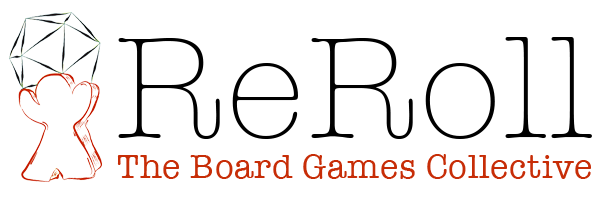
<style>
.page{position:relative;width:600px;height:200px;background:#ffffff}
.page>*{position:absolute;margin:0}
.t1{font:147.2px "AmericanTypewriter-Light";letter-spacing:0.02em;color:#000000}
.t2{font:34.3px "AmericanTypewriter";letter-spacing:0.02em;color:#c72d07}
</style>
<div class="page">
<p class="t1" style="left:118px;top:37px;width:474px;height:102px">ReRoll</p>
<p class="t2" style="left:117px;top:154px;width:474px;height:25px">The Board Games Collective</p>
</div>
